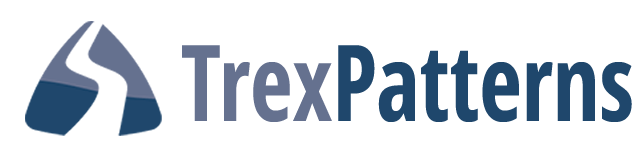
<style>
.page{position:relative;width:640px;height:160px;background:#ffffff}
.page>*{position:absolute;margin:0}
.t1{font:106.2px "OpenSansCondensed-Bold";color:#1f476c;scale:0.87 1}
.t2{font:106.2px "OpenSansCondensed-Bold";color:#65718f;scale:0.87 1}
</style>
<div class="page">
<p class="t1" style="left:182px;top:45px;width:450px;height:77px"><span class="t2">Trex</span>Patterns</p>
</div>
